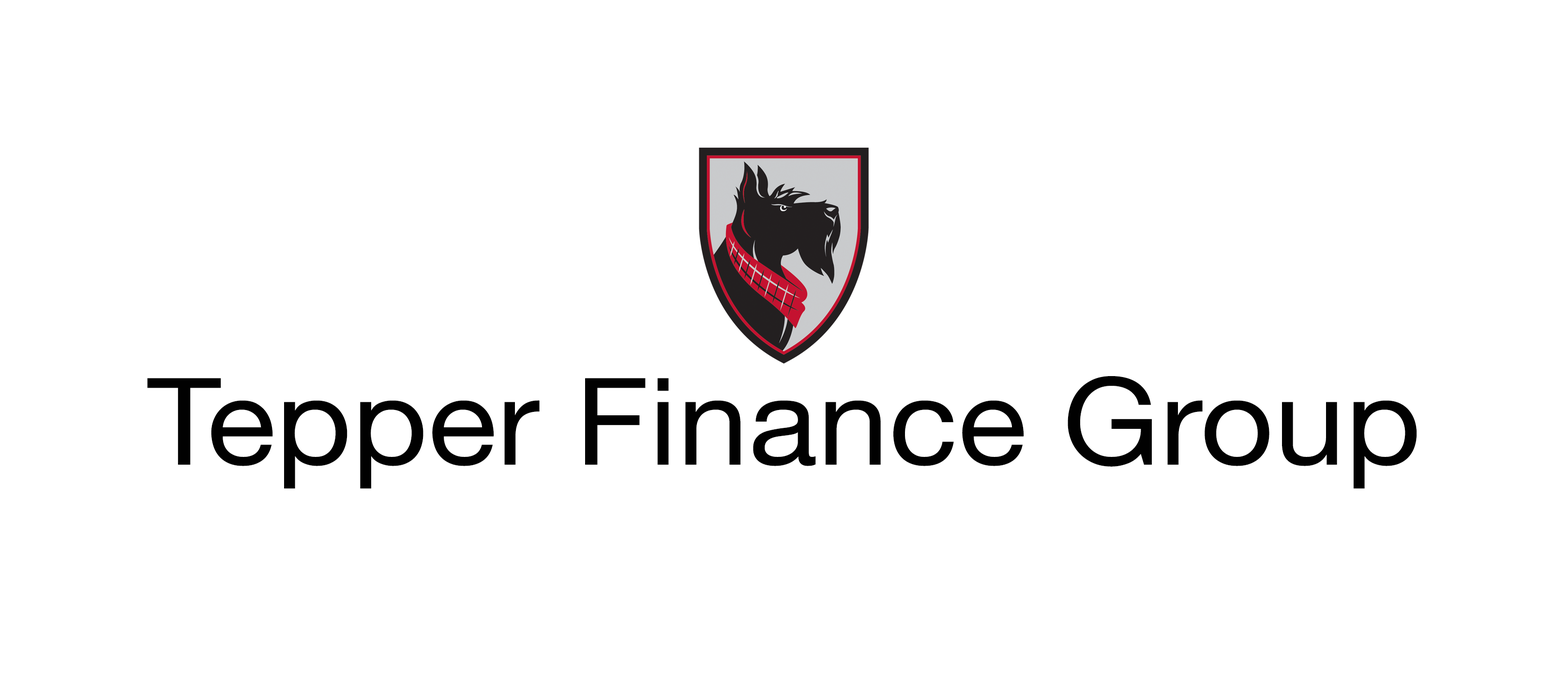
<style>
.page{position:relative;width:1568px;height:697px;background:#ffffff}
.page>*{position:absolute;margin:0}
.t1{font:121px "HelveticaNeue";color:#010101;scale:1.06 1}
</style>
<div class="page">
<p class="t1" style="left:147px;top:376px;width:1270px;height:113px">Tepper Finance Group</p>
</div>
